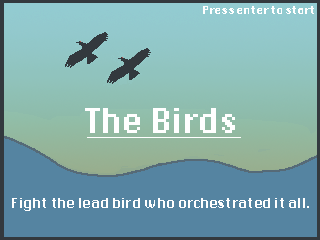
<style>
.page{position:relative;width:320px;height:240px;background:#5584a1}
.page>*{position:absolute;margin:0}
.t1{font:8px "DePixel-Bold";letter-spacing:-0.025em;color:#ffffff}
.t2{font:24px "DePixel-Bold";letter-spacing:-0.025em;color:#ffffff;text-decoration:underline}
.t3{font:10px "DePixel-Bold";letter-spacing:-0.025em;color:#ffffff}
</style>
<div class="page">
<p class="t1" style="left:203px;top:6px;width:111px;height:8px">Press enter to start</p>
<p class="t2" style="left:85px;top:108px;width:156px;height:30px">The Birds</p>
<p class="t3" style="left:12px;top:198px;width:297px;height:13px">Fight the lead bird who orchestrated it all.</p>
</div>
